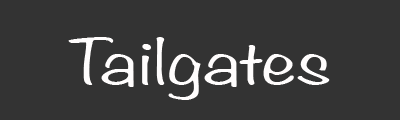
<style>
.page{position:relative;width:400px;height:120px;background:#333333}
.page>*{position:absolute;margin:0}
.t1{font:55px "Noteworthy-Light";color:#fffdfd;scale:1.5 1}
</style>
<div class="page">
<p class="t1" style="left:68px;top:37px;width:262px;height:63px">Tailgates</p>
</div>
